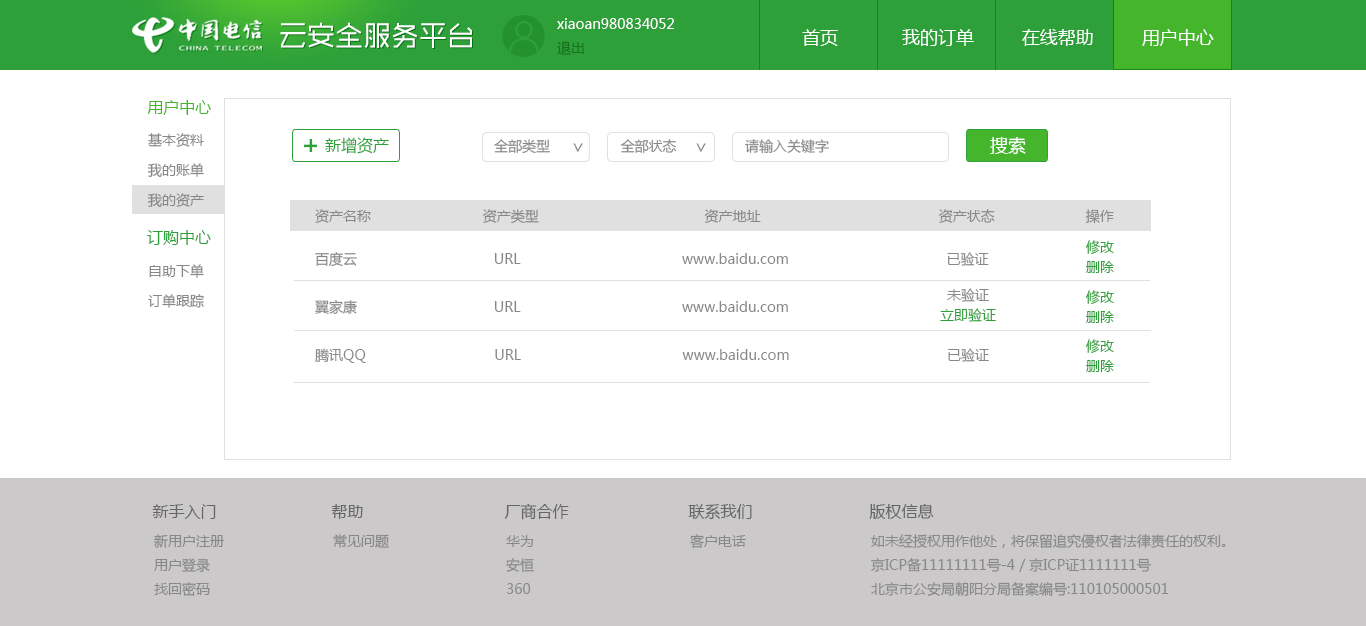
<style>
.page{position:relative;width:1366px;height:626px;background:#ffffff}
.page>*{position:absolute;margin:0}
.t1{font:28px "MFShangHei_Noncommercial-Regular";color:#ffffff}
.t2{font:28px "MFShangHei_Noncommercial-Regular"}
.t3{font:14px/24px "MicrosoftYaHei";color:#ffffff}
.t4{font:14px/24px "MicrosoftYaHei";color:#177220}
.t5{font:18px "MicrosoftYaHei";color:#ffffff}
.t6{font:16px "MicrosoftYaHei";color:#45b62b}
.t7{font:14px/30px "MicrosoftYaHei";color:#888888}
.t8{font:16px "MicrosoftYaHei";color:#2da039}
.t9{font:14px "MicrosoftYaHei";color:#888888}
.t10{font:18px "MicrosoftYaHei";color:#888888}
.t11{font:14px/20px "MicrosoftYaHei";color:#2da039}
.t12{font:14px/48px "MicrosoftYaHei";color:#888888}
.t13{font:14px/20px "MicrosoftYaHei";color:#888888}
.t14{font:16px "MicrosoftYaHei";color:#666666}
.t15{font:14px/24px "MicrosoftYaHei";color:#888888}
</style>
<div class="page">
<p class="t1" style="left:280px;top:22px;width:192px;height:26px">云安全服务平台</p>
<p class="t2" style="left:281px;top:23px;width:192px;height:26px">云安全服务平台</p>
<p class="t3" style="left:557px;top:18px;width:117px;height:37px">xiaoan980834052<br><span class="t4">退出</span></p>
<p class="t5" style="left:802px;top:29px;width:412px;height:17px">首页            我的订单         在线帮助         用户中心</p>
<p class="t6" style="left:147px;top:100px;width:64px;height:15px">用户中心</p>
<p class="t7" style="left:147px;top:133px;width:57px;height:75px">基本资料<br>我的账单<br>我的资产</p>
<p class="t8" style="left:325px;top:137px;width:64px;height:17px">新增资产</p>
<p class="t5" style="left:990px;top:137px;width:36px;height:18px">搜索</p>
<p class="t9" style="left:494px;top:139px;width:183px;height:15px">全部类型                 全部状态</p>
<p class="t10" style="left:573px;top:143px;width:10px;height:9px">&gt;</p>
<p class="t10" style="left:696px;top:143px;width:10px;height:9px">&gt;</p>
<p class="t9" style="left:745px;top:139px;width:84px;height:15px">请输入关键字</p>
<p class="t9" style="left:315px;top:209px;width:799px;height:15px">资产名称                           资产类型                                        资产地址                                           资产状态                      操作</p>
<p class="t8" style="left:147px;top:230px;width:64px;height:15px">订购中心</p>
<p class="t11" style="left:1086px;top:240px;width:28px;height:33px">修改<br>删除</p>
<p class="t12" style="left:315px;top:252px;width:674px;height:111px">百度云                                 URL                                       www.baidu.com                                      已验证<br>翼家康                                 URL                                       www.baidu.com                        <br>腾讯QQ                               URL                                       www.baidu.com                                      已验证</p>
<p class="t7" style="left:148px;top:264px;width:56px;height:44px">自助下单<br>订单跟踪</p>
<p class="t11" style="left:940px;top:288px;width:56px;height:34px;text-align:center"><span class="t13">未验证<br></span>立即验证</p>
<p class="t11" style="left:1086px;top:290px;width:28px;height:33px">修改<br>删除</p>
<p class="t11" style="left:1086px;top:339px;width:28px;height:33px">修改<br>删除</p>
<p class="t14" style="left:152px;top:504px;width:64px;height:15px">新手入门</p>
<p class="t14" style="left:331px;top:504px;width:32px;height:15px">帮助</p>
<p class="t14" style="left:504px;top:503px;width:65px;height:17px">厂商合作</p>
<p class="t14" style="left:688px;top:504px;width:64px;height:16px">联系我们</p>
<p class="t14" style="left:869px;top:503px;width:65px;height:16px">版权信息</p>
<p class="t15" style="left:154px;top:534px;width:70px;height:62px">新用户注册<br>用户登录<br>找回密码</p>
<p class="t9" style="left:333px;top:534px;width:56px;height:14px">常见问题</p>
<p class="t9" style="left:690px;top:534px;width:56px;height:14px">客户电话</p>
<p class="t15" style="left:871px;top:534px;width:355px;height:63px">如未经授权用作他处，将保留追究侵权者法律责任的权利。<br>京ICP备11111111号-4 / 京ICP证1111111号<br>北京市公安局朝阳分局备案编号:110105000501</p>
<p class="t15" style="left:506px;top:535px;width:28px;height:59px">华为<br>安恒<br>360</p>
</div>
